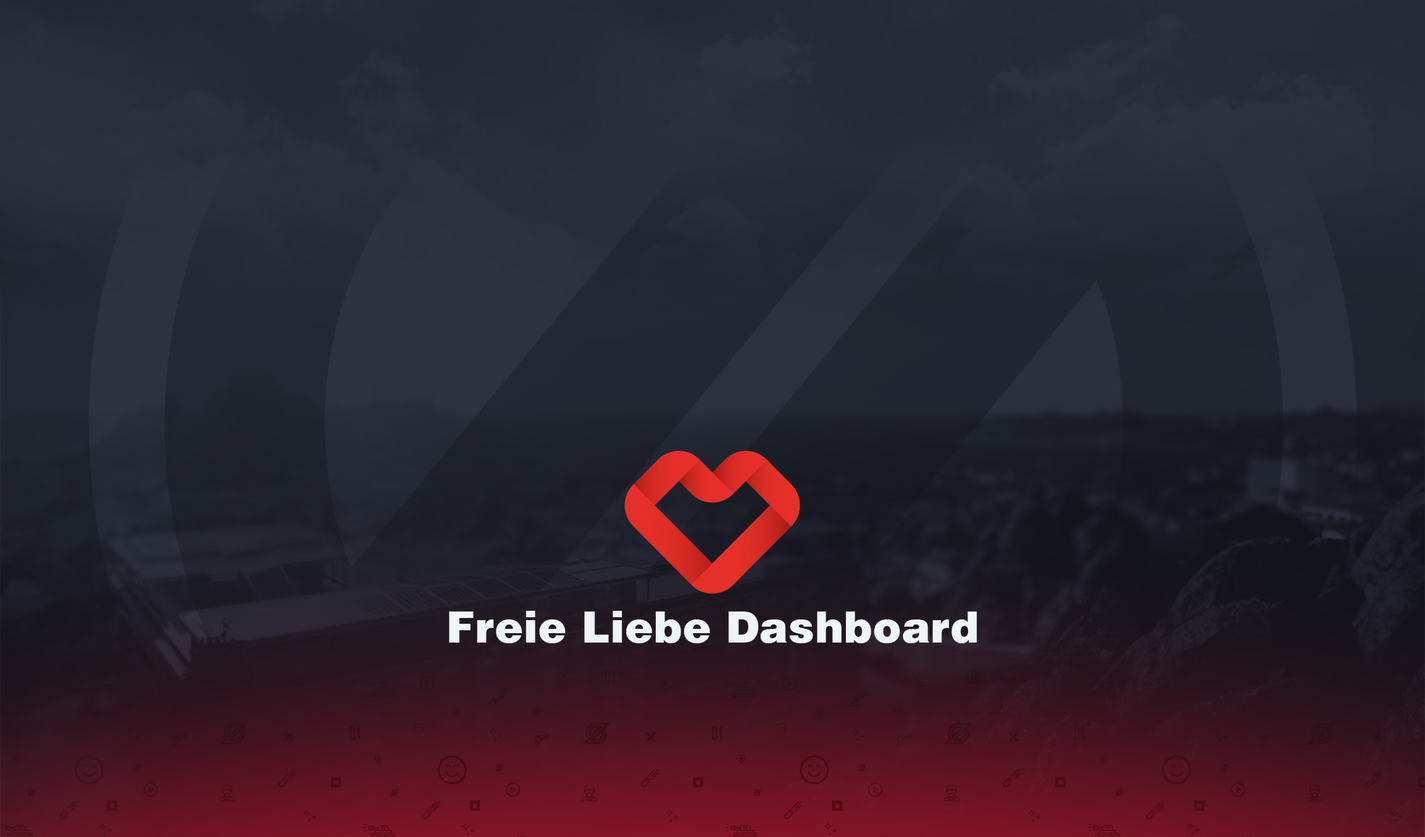
<style>
.page{position:relative;width:1425px;height:837px}
.page>*{position:absolute;margin:0}
.t1{font:43.4px "Helvetica-Black";color:#edf5f5}
</style>
<div class="page">
<p class="t1" style="left:449px;top:611px;width:528px;height:32px">Freie Liebe Dashboard</p>
</div>
